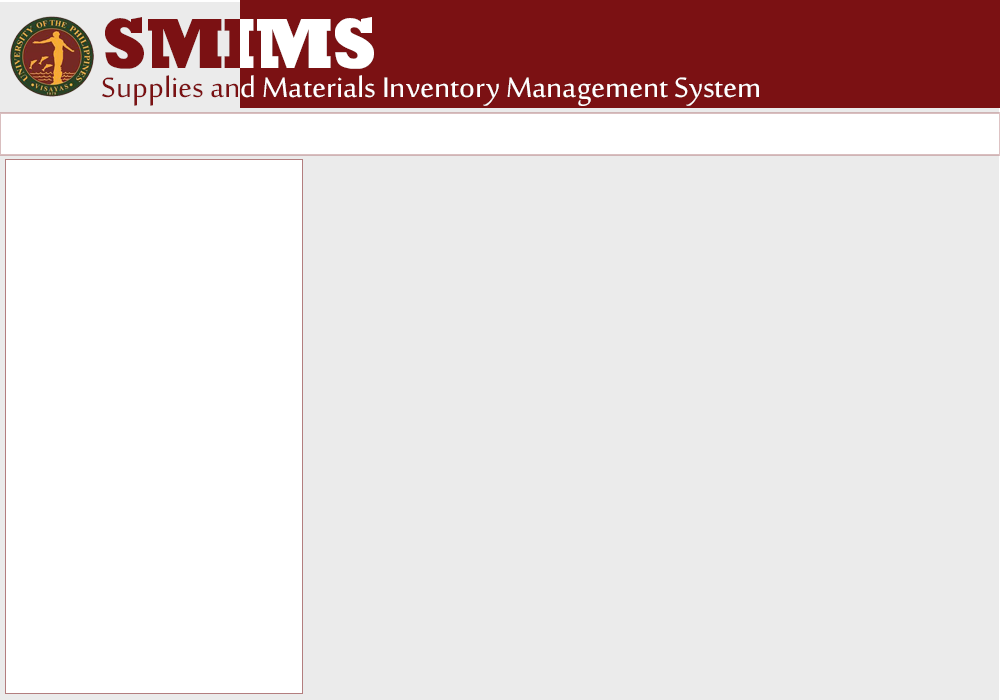
<style>
.page{position:relative;width:1000px;height:700px;background:#ebebeb}
.page>*{position:absolute;margin:0}
.t1{font:38.7px "SakkalMajalla";color:#ffffff}
.t2{font:38.7px "SakkalMajalla";color:#7b1113}
</style>
<div class="page">
<p class="t1" style="left:102px;top:75px;width:657px;height:31px"><span class="t2">Supplies an</span>d Materials Inventory Management System</p>
</div>
